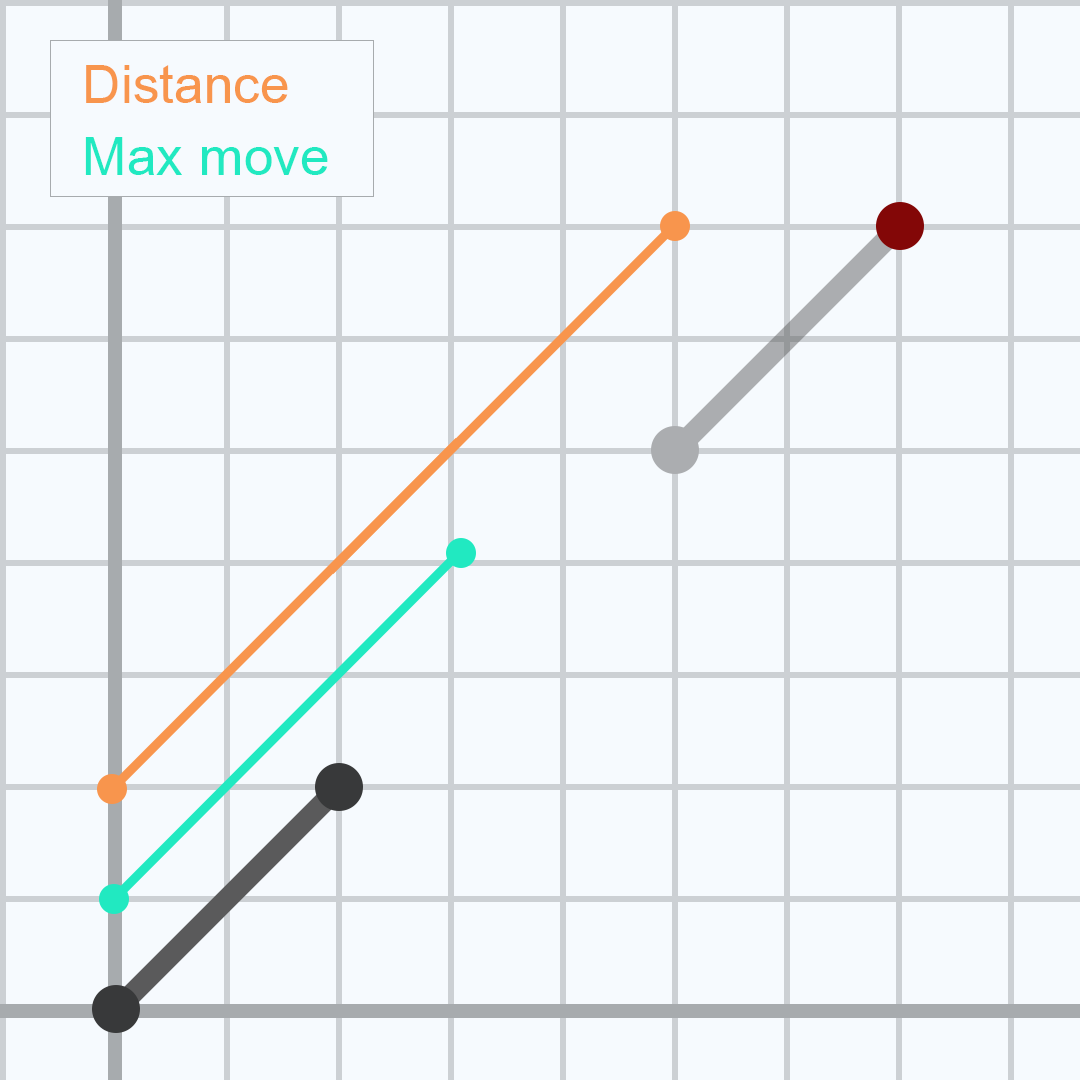
<style>
.page{position:relative;width:1080px;height:1080px;background:#f6fafe}
.page>*{position:absolute;margin:0}
.t1{font:59.3px "Miriam";color:#f8954d}
.t2{font:59.3px "Miriam";color:#21e9c1}
</style>
<div class="page">
<p class="t1" style="left:85px;top:65px;width:243px;height:110px">Distance<br><span class="t2">Max move</span></p>
</div>
